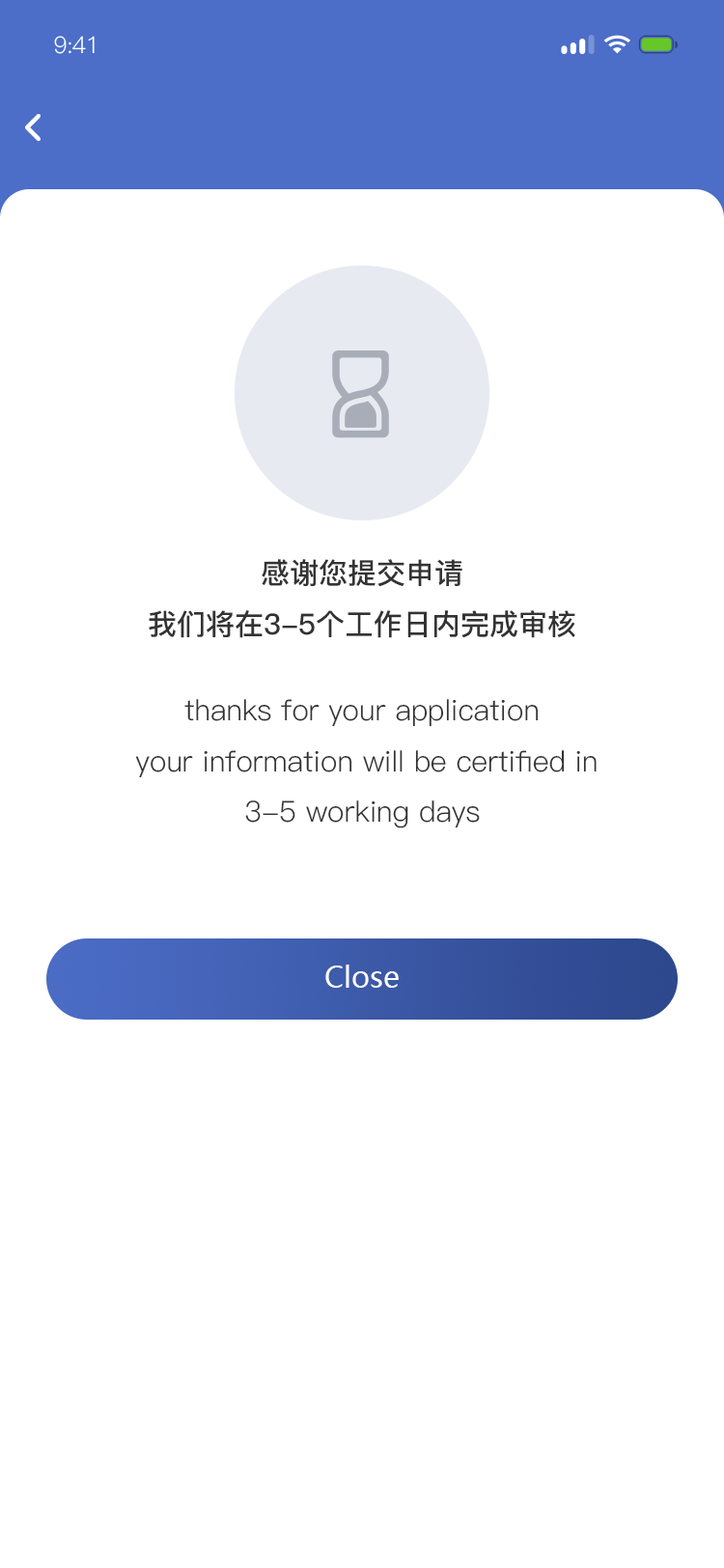
<style>
.page{position:relative;width:724px;height:1568px;background:#ffffff}
.page>*{position:absolute;margin:0}
.t1{font:23.2px "PingFang-SC-Regular";letter-spacing:-0.025em;color:#ffffff}
.t2{font:29px "PingFang-SC-Bold";color:#333333}
.t3{font:29px "PingFang-SC-Regular";color:#333333}
.t4{font:29px "MicrosoftYaHei";color:#ffffff}
</style>
<div class="page">
<p class="t1" style="left:54px;top:36px;width:41px;height:18px">9:41</p>
<p class="t2" style="left:149px;top:559px;width:426px;height:79px;text-align:center">感谢您提交申请<br>我们将在3-5个工作日内完成审核</p>
<p class="t3" style="left:135px;top:699px;width:462px;height:129px;text-align:center">thanks for your application<br> your information will be certified in <br>3-5 working days</p>
<p class="t4" style="left:325px;top:965px;width:74px;height:23px">Close</p>
</div>
